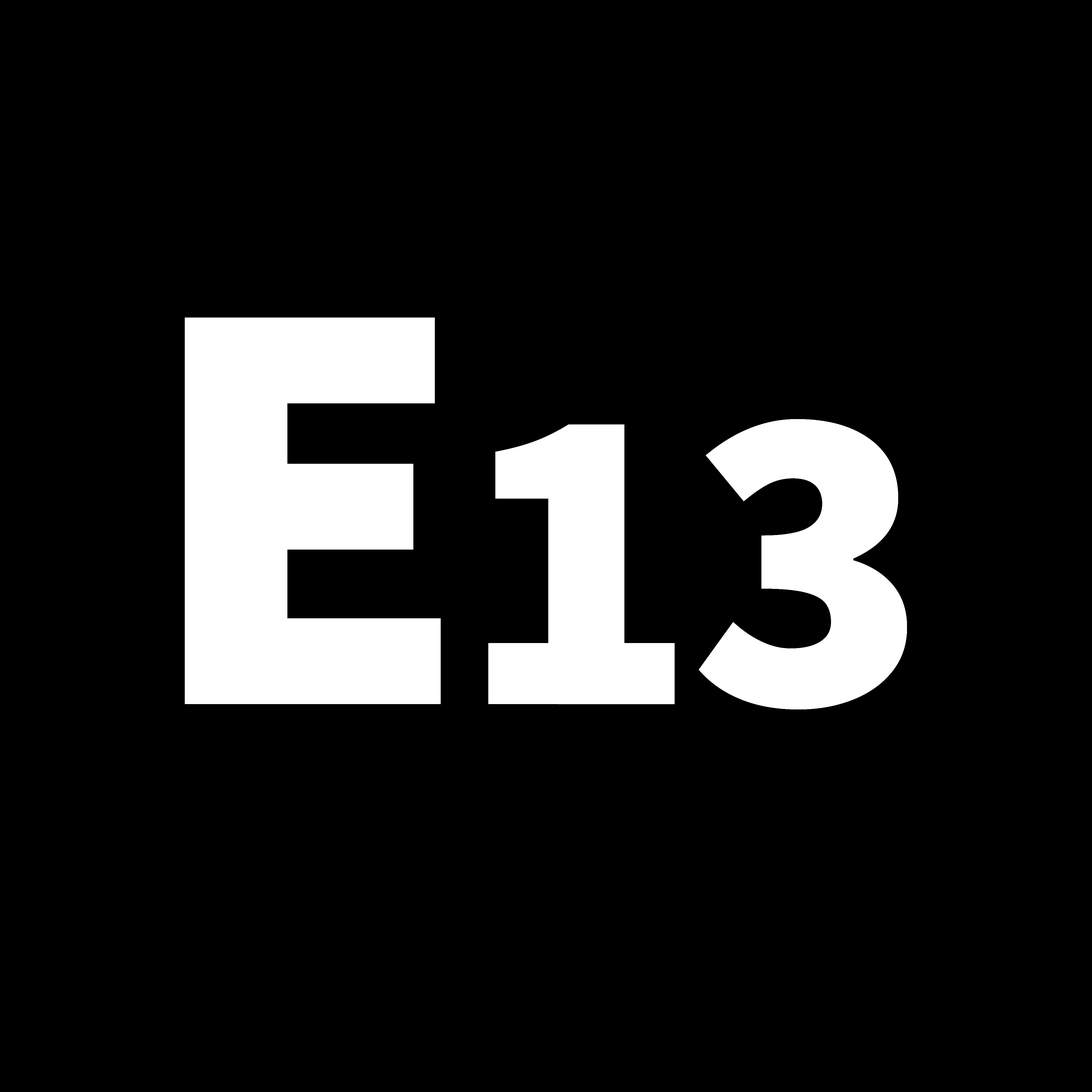
<style>
.page{position:relative;width:1092px;height:1092px;background:#000000}
.page>*{position:absolute;margin:0}
.t1{font:441.1px "Assistant-ExtraBold";color:#ffffff}
.t2{font:594.6px "Assistant-ExtraBold";color:#ffffff}
</style>
<div class="page">
<p class="t1" style="left:185px;top:318px;width:722px;height:391px"><span class="t2">E</span>13</p>
</div>
